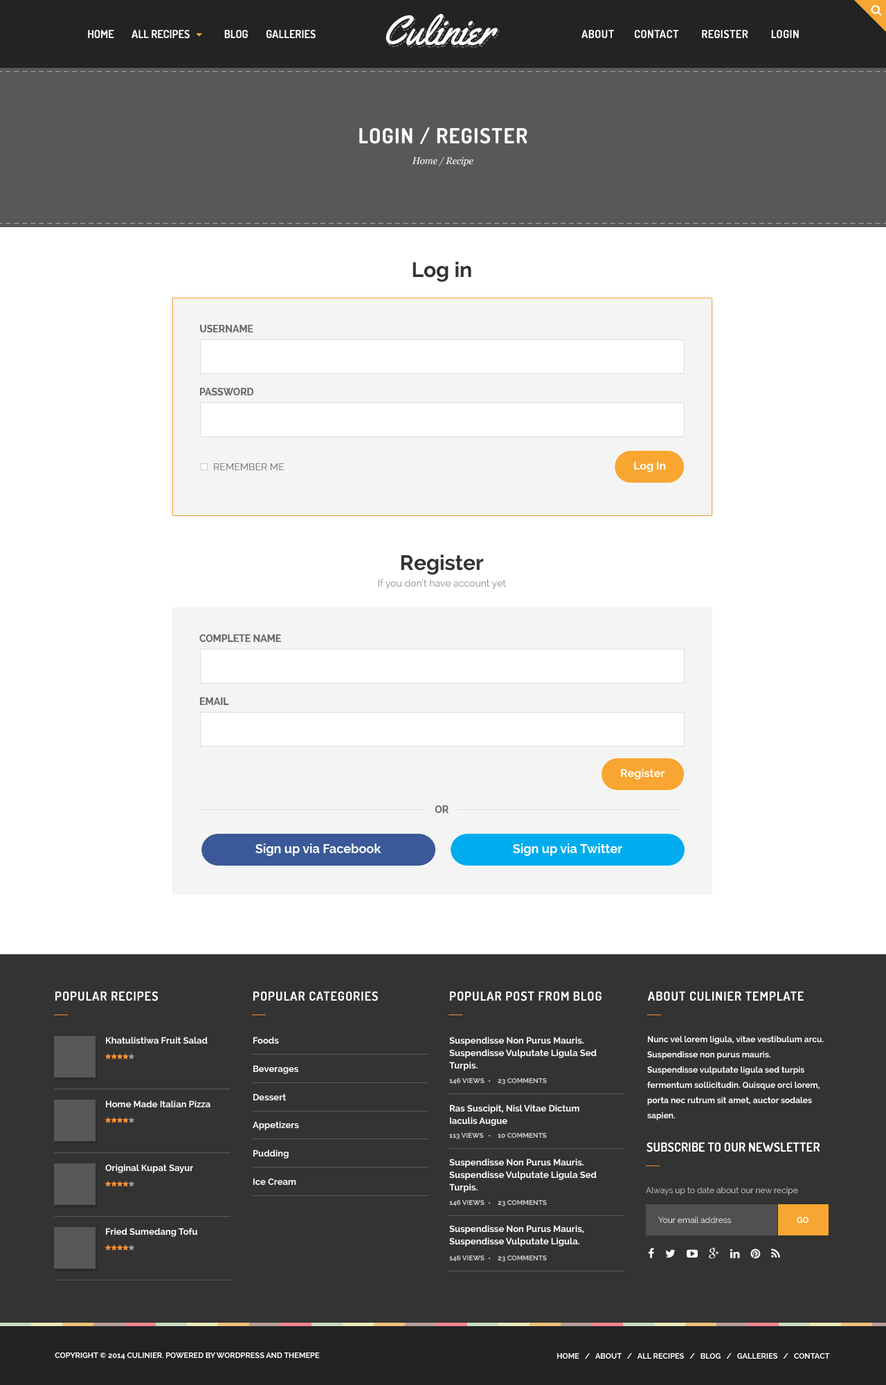
<style>
.page{position:relative;width:886px;height:1385px;background:#ffffff}
.page>*{position:absolute;margin:0}
.t1{font:41.5px "Yellowtail";color:#ffffff}
.t2{font:11.1px "Dosis-Bold";letter-spacing:0.025em;color:#ffffff;text-transform:uppercase}
.t3{font:20.8px "Dosis-Bold";letter-spacing:0.05em;color:#ffffff;text-transform:uppercase}
.t4{font:9.7px "Georgia-Italic";letter-spacing:-0.025em;color:#ffffff}
.t5{font:20.8px "Raleway-Bold";color:#333333}
.t6{font:9.7px "Raleway-Bold";color:#656565}
.t7{font:11.1px "Raleway-Bold";color:#ffffff}
.t8{font:9.7px "Raleway";color:#656565}
.t9{font:9.7px "Raleway";color:#878787}
.t10{font:12.5px "Raleway-Bold";color:#ffffff}
.t11{font:12.5px "Dosis-Bold";letter-spacing:0.05em;color:#ffffff;text-transform:uppercase}
.t12{font:9px "Raleway-Bold";color:#ffffff}
.t13{font:9px/12.5px "Raleway-Bold";color:#ffffff}
.t14{font:8.3px/15.2px "Raleway-Bold";color:#ffffff}
.t15{font:6.9px "Raleway-Bold";color:#cccccc;text-transform:uppercase}
.t16{font:12.5px "Dosis-Bold";letter-spacing:0.005em;color:#ffffff;text-transform:uppercase}
.t17{font:8.3px "Raleway";color:#dcdcdc}
.t18{font:8.3px "Raleway";color:#ffffff}
.t19{font:8.3px "Raleway-Bold";color:#ffffff}
.t20{font:7.6px "Raleway-Bold";color:#ffffff}
.t21{font:7.6px "Raleway-Bold";color:#ffffff;text-transform:uppercase}
</style>
<div class="page">
<p class="t1" style="left:386px;top:14px;width:112px;height:32px">Culinier</p>
<p class="t2" style="left:582px;top:30px;width:217px;height:9px">ABOUT        CONTACT         Register         login</p>
<p class="t3" style="left:359px;top:127px;width:169px;height:18px">LOGIN / REGISTER</p>
<p class="t4" style="left:412px;top:156px;width:62px;height:10px">Home / Recipe</p>
<p class="t5" style="left:413px;top:262px;width:58px;height:20px">Log in</p>
<p class="t6" style="left:200px;top:325px;width:53px;height:7px">USERNAME</p>
<p class="t6" style="left:199px;top:388px;width:55px;height:7px">PASSWORD</p>
<p class="t7" style="left:634px;top:461px;width:32px;height:11px">Log In</p>
<p class="t8" style="left:214px;top:463px;width:71px;height:7px">REMEMBER ME</p>
<p class="t5" style="left:401px;top:555px;width:83px;height:20px">Register</p>
<p class="t9" style="left:379px;top:579px;width:127px;height:10px">If you don’t have account yet</p>
<p class="t6" style="left:199px;top:634px;width:82px;height:8px">COMPLETE NAME</p>
<p class="t6" style="left:199px;top:697px;width:30px;height:8px">EMAIL</p>
<p class="t7" style="left:621px;top:768px;width:44px;height:12px">Register</p>
<p class="t6" style="left:435px;top:805px;width:14px;height:8px">OR</p>
<p class="t10" style="left:255px;top:843px;width:126px;height:13px">Sign up via Facebook</p>
<p class="t10" style="left:513px;top:843px;width:109px;height:13px">Sign up via Twitter</p>
<p class="t11" style="left:55px;top:991px;width:103px;height:10px">POPULAR RECIPES</p>
<p class="t11" style="left:253px;top:991px;width:125px;height:10px">POPULAR CATEGORIES</p>
<p class="t11" style="left:450px;top:991px;width:152px;height:10px">POPULAR Post from blog</p>
<p class="t11" style="left:648px;top:991px;width:156px;height:9px">About CULINIER Template</p>
<p class="t12" style="left:106px;top:1036px;width:102px;height:8px">Khatulistiwa Fruit Salad</p>
<p class="t12" style="left:253px;top:1036px;width:26px;height:8px">Foods</p>
<p class="t13" style="left:449px;top:1036px;width:148px;height:34px">Suspendisse Non Purus Mauris. <br>Suspendisse Vulputate Ligula Sed <br>Turpis.</p>
<p class="t14" style="left:647px;top:1036px;width:177px;height:84px">Nunc vel lorem ligula, vitae vestibulum arcu. Suspendisse non purus mauris. <br>Suspendisse vulputate ligula sed turpis fermentum sollicitudin. Quisque orci lorem, porta nec rutrum sit amet, auctor sodales sapien.</p>
<p class="t12" style="left:253px;top:1065px;width:45px;height:9px">Beverages</p>
<p class="t15" style="left:449px;top:1078px;width:36px;height:6px">146 Views</p>
<p class="t15" style="left:498px;top:1078px;width:49px;height:6px">23 Comments</p>
<p class="t12" style="left:253px;top:1093px;width:34px;height:8px">Dessert</p>
<p class="t12" style="left:106px;top:1100px;width:104px;height:8px">Home Made Italian Pizza</p>
<p class="t13" style="left:450px;top:1104px;width:129px;height:22px">Ras Suscipit, Nisl Vitae Dictum <br>Iaculis Augue</p>
<p class="t12" style="left:253px;top:1121px;width:46px;height:9px">Appetizers</p>
<p class="t15" style="left:449px;top:1133px;width:35px;height:6px">113 Views</p>
<p class="t15" style="left:498px;top:1133px;width:49px;height:4px">10 Comments</p>
<p class="t16" style="left:647px;top:1142px;width:173px;height:10px">Subscribe to our newsletter</p>
<p class="t12" style="left:253px;top:1149px;width:36px;height:9px">Pudding</p>
<p class="t12" style="left:105px;top:1164px;width:88px;height:9px">Original Kupat Sayur</p>
<p class="t13" style="left:449px;top:1158px;width:148px;height:34px">Suspendisse Non Purus Mauris. <br>Suspendisse Vulputate Ligula Sed <br>Turpis.</p>
<p class="t12" style="left:253px;top:1178px;width:43px;height:7px">Ice Cream</p>
<p class="t17" style="left:646px;top:1187px;width:152px;height:8px">Always up to date about our new recipe</p>
<p class="t15" style="left:449px;top:1200px;width:36px;height:6px">146 Views</p>
<p class="t15" style="left:498px;top:1200px;width:49px;height:6px">23 Comments</p>
<p class="t18" style="left:658px;top:1216px;width:73px;height:7px">Your email address</p>
<p class="t19" style="left:797px;top:1216px;width:12px;height:7px">GO</p>
<p class="t12" style="left:106px;top:1227px;width:91px;height:9px">Fried Sumedang Tofu</p>
<p class="t13" style="left:449px;top:1225px;width:135px;height:21px">Suspendisse Non Purus Mauris, <br>Suspendisse Vulputate Ligula.</p>
<p class="t15" style="left:449px;top:1255px;width:36px;height:6px">146 Views</p>
<p class="t15" style="left:498px;top:1255px;width:49px;height:6px">23 Comments</p>
<p class="t20" style="left:55px;top:1352px;width:265px;height:7px">COPYRIGHT © 2014 CULINIER. POWERED BY WORDPRESS AND THEMEPE</p>
<p class="t21" style="left:557px;top:1353px;width:273px;height:5px">Home   /   About   /   All Recipes   /   Blog   /   Galleries   /   Contact</p>
</div>
